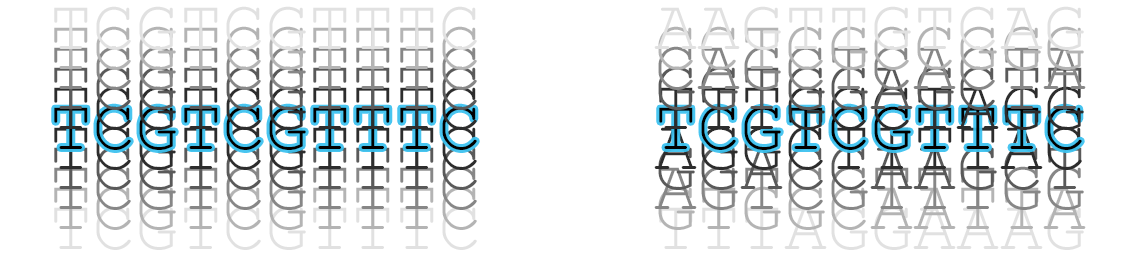
<style>
.page{position:relative;width:1136px;height:258px;background:#ffffff}
.page>*{position:absolute;margin:0}
.t1{font:72px "CourierNewPSMT";color:#e1e1e1}
.t2{font:72px "CourierNewPSMT";color:#b4b4b4}
.t3{font:72px "CourierNewPSMT";color:#878787}
.t4{font:72px "CourierNewPSMT";color:#5a5a5a}
.t5{font:72px "CourierNewPSMT";color:#2d2d2d}
.t6{font:72px "CourierNewPSMT";color:#000000}
</style>
<div class="page">
<p class="t1" style="left:54px;top:6px;width:1030px;height:44px">TCGTCGTTTC    AAGTTGTCAG</p>
<p class="t2" style="left:54px;top:26px;width:1030px;height:44px">TCGTCGTTTC    CCTCGCCGGG</p>
<p class="t3" style="left:54px;top:46px;width:1032px;height:44px">TCGTCGTTTC    CAGCTCACTA</p>
<p class="t4" style="left:54px;top:66px;width:1028px;height:44px">TCGTCGTTTC    GGTGGAGCTT</p>
<p class="t5" style="left:54px;top:86px;width:1030px;height:44px">TCGTCGTTTC    TTTGCCTAGG</p>
<p class="t6" style="left:54px;top:106px;width:1028px;height:44px">TCGTCGTTTC    TCGTCGTTTC</p>
<p class="t5" style="left:54px;top:126px;width:1028px;height:44px">TCGTCGTTTC    AGGCTTTTAC</p>
<p class="t4" style="left:54px;top:146px;width:1028px;height:44px">TCGTCGTTTC    GGACCAAGCT</p>
<p class="t3" style="left:54px;top:166px;width:1030px;height:44px">TCGTCGTTTC    AGTCGTTTGG</p>
<p class="t2" style="left:54px;top:186px;width:1032px;height:44px">TCGTCGTTTC    GTGGCAATTA</p>
<p class="t1" style="left:54px;top:206px;width:1030px;height:44px">TCGTCGTTTC    TTTAGGAAAG</p>
</div>
